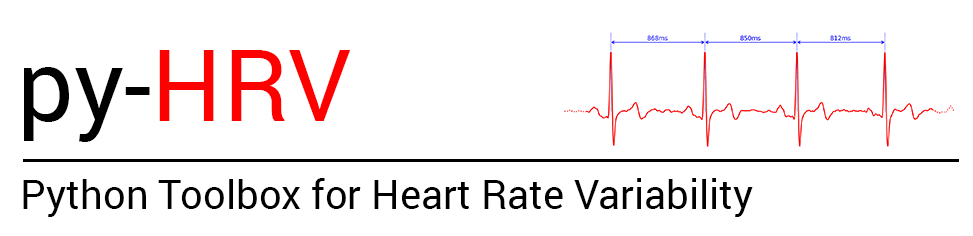
<style>
.page{position:relative;width:973px;height:236px;background:#ffffff}
.page>*{position:absolute;margin:0}
.t1{font:100px "Roboto-Regular";color:#000000}
.t2{font:100px "Roboto-Regular";color:#fd0000}
.t3{font:40px "Roboto-Regular";color:#000000}
</style>
<div class="page">
<p class="t1" style="left:24px;top:50px;width:327px;height:92px">py-<span class="t2">HRV</span></p>
<p class="t3" style="left:23px;top:178px;width:730px;height:39px">Python Toolbox for Heart Rate Variability</p>
</div>
